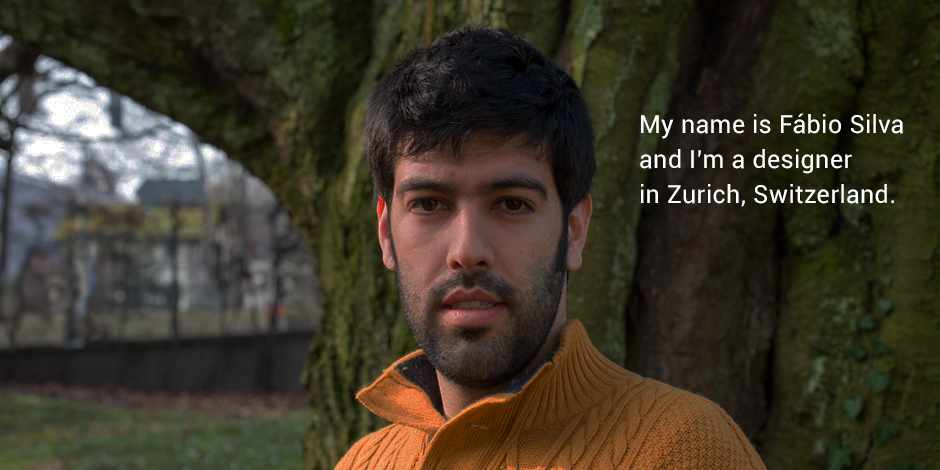
<style>
.page{position:relative;width:940px;height:470px}
.page>*{position:absolute;margin:0}
.t1{font:25px/35px "Roboto-Regular";letter-spacing:0.02em;color:#ffffff}
</style>
<div class="page">
<p class="t1" style="left:640px;top:113px;width:263px;height:94px">My name is Fábio Silva <br>and I’m a designer <br>in Zurich, Switzerland.</p>
</div>
